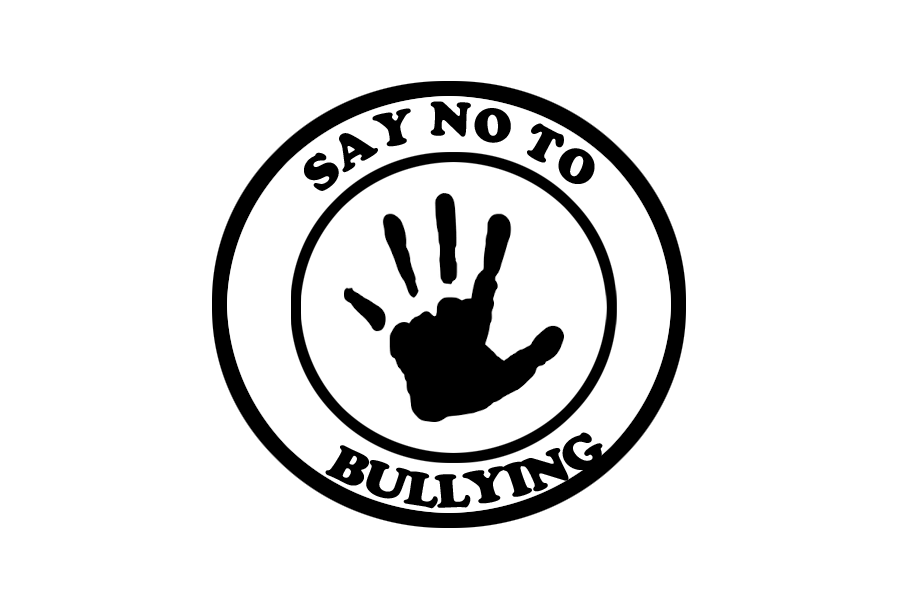
<style>
.page{position:relative;width:900px;height:600px;background:#ffffff}
.page>*{position:absolute;margin:0}
.t1{font:50px "CooperBlack";color:#000000}
.t2{font:49.3px "CooperBlack";color:#000000;scale:1.11 1}
</style>
<div class="page">
<p class="t1" style="left:304px;top:101px;width:291px;height:90px">SAY NO TO</p>
<p class="t2" style="left:325px;top:432px;width:278px;height:77px;rotate:1deg">BULLYING</p>
</div>
